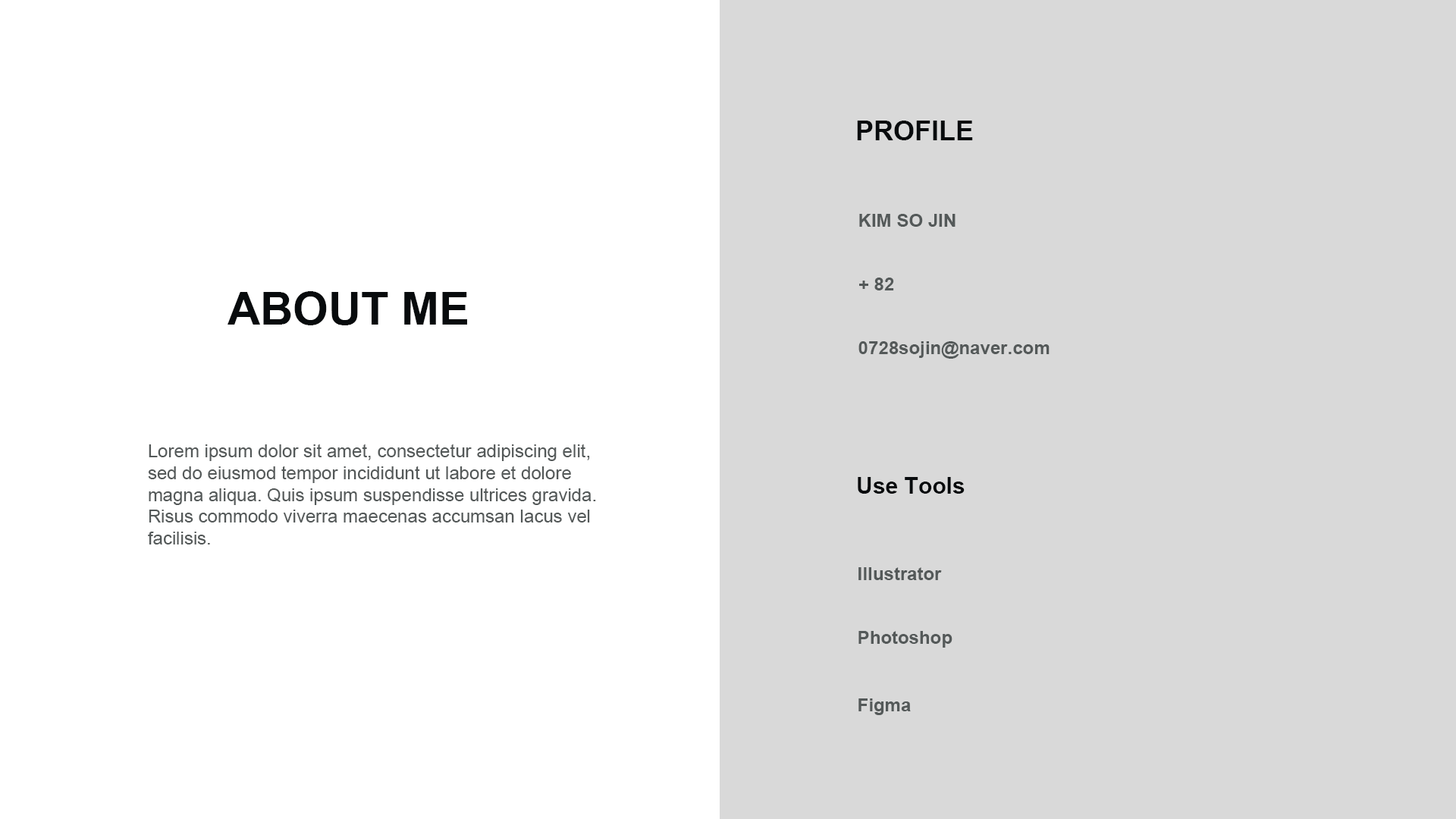
<style>
.page{position:relative;width:1456px;height:819px;background:#d9d9d9}
.page>*{position:absolute;margin:0}
.t1{font:27.3px "Arial-BoldMT";color:#080b0d;text-transform:uppercase}
.t2{font:18.2px "Arial-BoldMT";color:#545959}
.t3{font:45.5px "Arial-BoldMT";color:#080b0d;text-transform:uppercase}
.t4{font:18.2px "ArialMT";color:#545959}
.t5{font:22.7px "Arial-BoldMT";color:#080b0d}
</style>
<div class="page">
<p class="t1" style="left:857px;top:121px;width:116px;height:19px">Profile</p>
<p class="t2" style="left:859px;top:214px;width:96px;height:13px">KIM SO JIN</p>
<p class="t2" style="left:859px;top:278px;width:35px;height:12px">+ 82</p>
<p class="t3" style="left:227px;top:291px;width:240px;height:34px">about me</p>
<p class="t2" style="left:858px;top:341px;width:192px;height:18px">0728sojin@naver.com</p>
<p class="t4" style="left:148px;top:444px;width:448px;height:100px">Lorem ipsum dolor sit amet, consectetur adipiscing elit, sed do eiusmod tempor incididunt ut labore et dolore magna aliqua. Quis ipsum suspendisse ultrices gravida. Risus commodo viverra maecenas accumsan lacus vel facilisis.</p>
<p class="t5" style="left:858px;top:477px;width:107px;height:17px">Use Tools</p>
<p class="t2" style="left:858px;top:567px;width:84px;height:13px">Illustrator</p>
<p class="t2" style="left:858px;top:631px;width:94px;height:17px">Photoshop</p>
<p class="t2" style="left:858px;top:698px;width:53px;height:17px">Figma</p>
</div>
